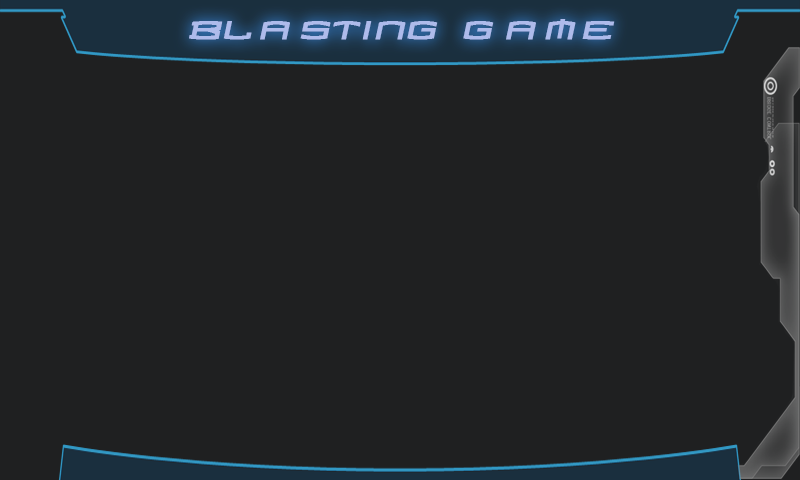
<style>
.page{position:relative;width:800px;height:480px;background:#1f2021}
.page>*{position:absolute;margin:0}
.t1{font:36px "Homoarakhn";color:#aebbeb;font-weight:bold}
</style>
<div class="page">
<p class="t1" style="left:189px;top:19px;width:426px;height:21px">BLASTING GAME</p>
</div>
